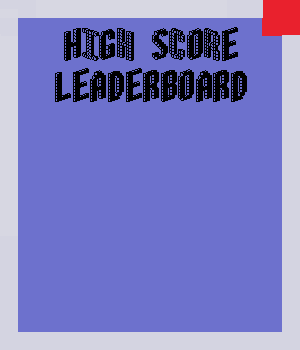
<style>
.page{position:relative;width:300px;height:350px;background:#6d71cd}
.page>*{position:absolute;margin:0}
.t1{font:34.6px "Blox-(BRK";color:#000000}
</style>
<div class="page">
<p class="t1" style="left:55px;top:27px;width:192px;height:75px;text-align:center">hIgH sCoRe<br>leaderboard</p>
</div>
